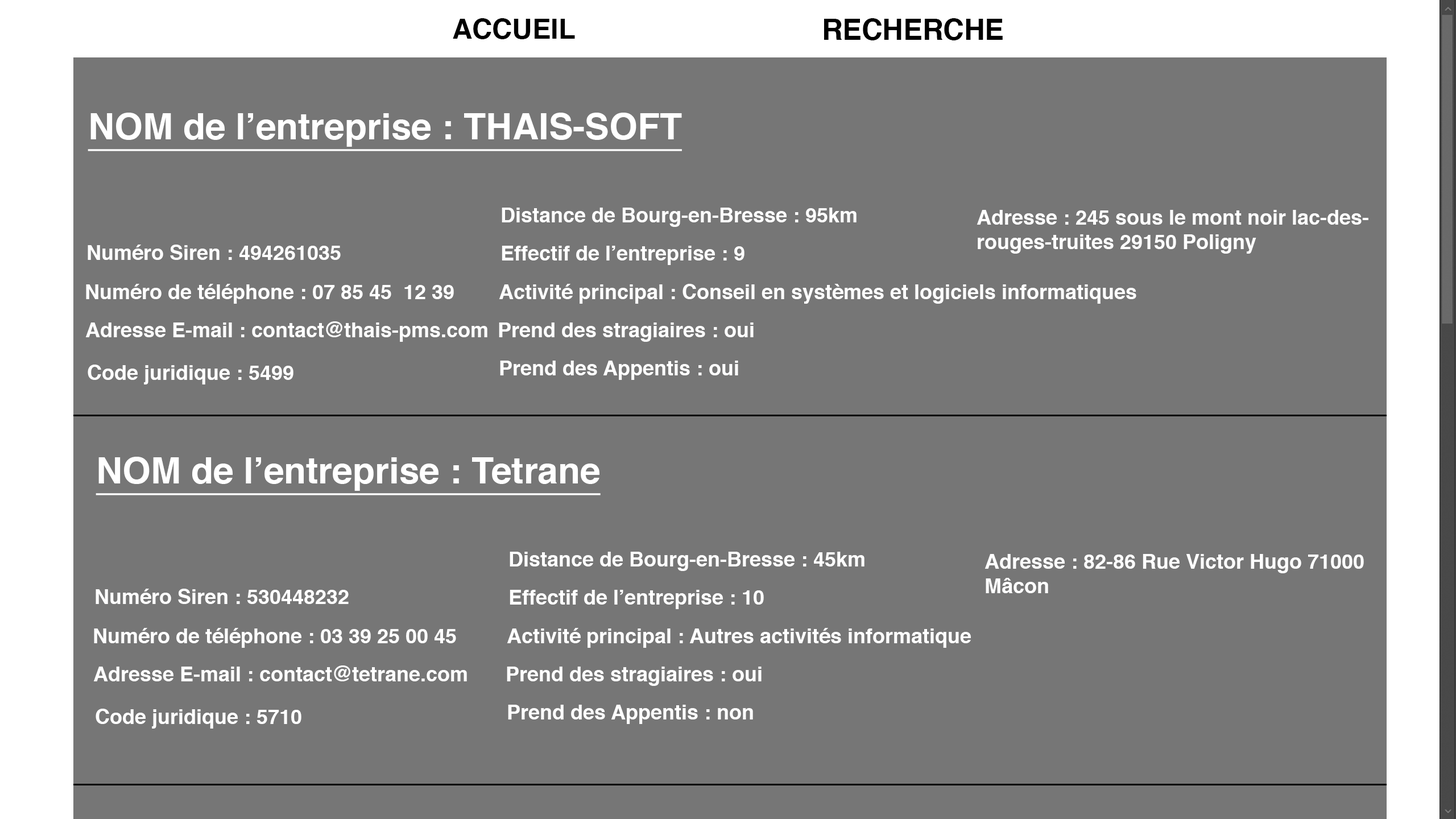
<style>
.page{position:relative;width:1456px;height:819px;background:#767676}
.page>*{position:absolute;margin:0}
.t1{font:36.4px "Helvetica-Bold";color:#ffffff;text-decoration:underline}
.t2{font:20.5px "Helvetica-Bold";color:#ffffff}
</style>
<div class="page">
<p class="t1" style="left:88px;top:113px;width:594px;height:38px">NOM de l’entreprise : THAIS-SOFT</p>
<p class="t2" style="left:502px;top:208px;width:355px;height:19px">Distance de Bourg-en-Bresse : 95km</p>
<p class="t2" style="left:977px;top:210px;width:391px;height:44px">Adresse : 245 sous le mont noir lac-des-<br>rouges-truites 29150 Poligny</p>
<p class="t2" style="left:88px;top:245px;width:253px;height:15px">Numéro Siren : 494261035</p>
<p class="t2" style="left:502px;top:246px;width:242px;height:19px">Effectif de l’entreprise : 9</p>
<p class="t2" style="left:86px;top:284px;width:368px;height:20px">Numéro de téléphone : 07 85 45  12 39</p>
<p class="t2" style="left:499px;top:284px;width:637px;height:20px">Activité principal : Conseil en systèmes et logiciels informatiques</p>
<p class="t2" style="left:85px;top:321px;width:402px;height:21px">Adresse E-mail : contact@thais-pms.com</p>
<p class="t2" style="left:499px;top:322px;width:255px;height:20px">Prend des stragiaires : oui</p>
<p class="t2" style="left:88px;top:365px;width:205px;height:19px">Code juridique : 5499</p>
<p class="t2" style="left:500px;top:361px;width:238px;height:19px">Prend des Appentis : oui</p>
<p class="t1" style="left:96px;top:457px;width:505px;height:38px">NOM de l’entreprise : Tetrane</p>
<p class="t2" style="left:510px;top:552px;width:354px;height:19px">Distance de Bourg-en-Bresse : 45km</p>
<p class="t2" style="left:984px;top:554px;width:380px;height:39px">Adresse : 82-86 Rue Victor Hugo 71000<br>Mâcon</p>
<p class="t2" style="left:96px;top:589px;width:253px;height:15px">Numéro Siren : 530448232</p>
<p class="t2" style="left:510px;top:590px;width:254px;height:19px">Effectif de l’entreprise : 10</p>
<p class="t2" style="left:94px;top:628px;width:362px;height:20px">Numéro de téléphone : 03 39 25 00 45</p>
<p class="t2" style="left:507px;top:628px;width:464px;height:20px">Activité principal : Autres activités informatique</p>
<p class="t2" style="left:93px;top:665px;width:374px;height:16px">Adresse E-mail : contact@tetrane.com</p>
<p class="t2" style="left:507px;top:667px;width:255px;height:19px">Prend des stragiaires : oui</p>
<p class="t2" style="left:96px;top:709px;width:205px;height:20px">Code juridique : 5710</p>
<p class="t2" style="left:508px;top:705px;width:245px;height:19px">Prend des Appentis : non</p>
</div>
